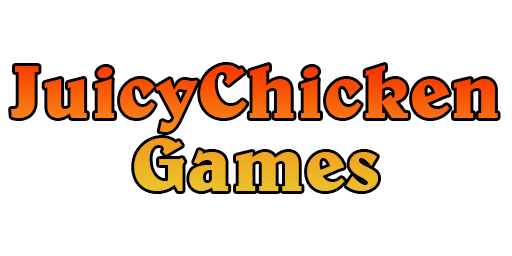
<style>
.page{position:relative;width:512px;height:256px;background:#ffffff}
.page>*{position:absolute;margin:0}
.t1{font:76.7px/73px "BelweBT-Bold"}
</style>
<div class="page">
<p class="t1" style="left:11px;top:65px;width:487px;height:126px;text-align:center">JuicyChicken<br>Games</p>
</div>
